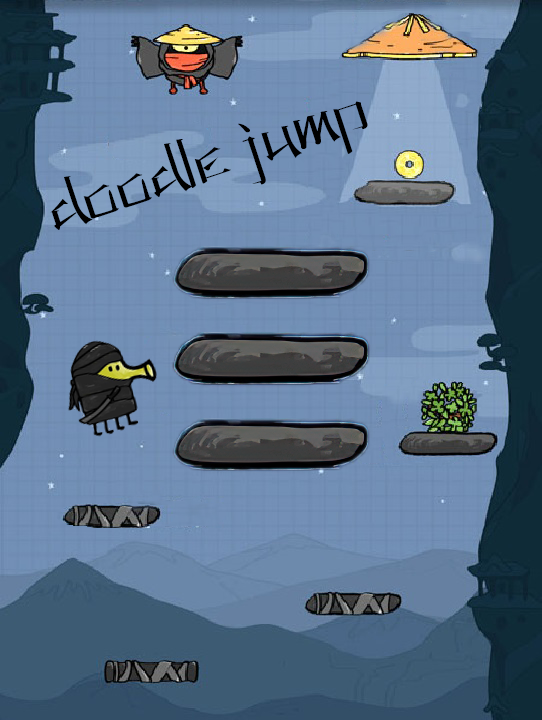
<style>
.page{position:relative;width:542px;height:720px}
.page>*{position:absolute;margin:0}
.t1{font:60px "KANEIWA-alp-regular";color:#000000}
</style>
<div class="page">
<p class="t1" style="left:50px;top:101px;width:318px;height:129px;rotate:-18deg">doodle jump</p>
</div>
